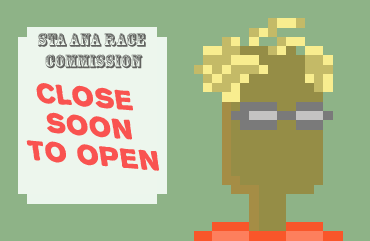
<style>
.page{position:relative;width:370px;height:241px;background:#8eb387}
.page>*{position:absolute;margin:0}
.t1{font:18px "RosewoodStd-Regular";color:#61625f}
.t2{font:24.8px "Propaganda";color:#f95350;scale:1.06 1}
</style>
<div class="page">
<p class="t1" style="left:38px;top:33px;width:108px;height:36px;text-align:center">STA ANA RACE <br>COMMISSION</p>
<p class="t2" style="left:26px;top:83px;width:133px;height:88px;text-align:center;rotate:5deg">CLOSE<br>SOON<br>to open</p>
</div>
